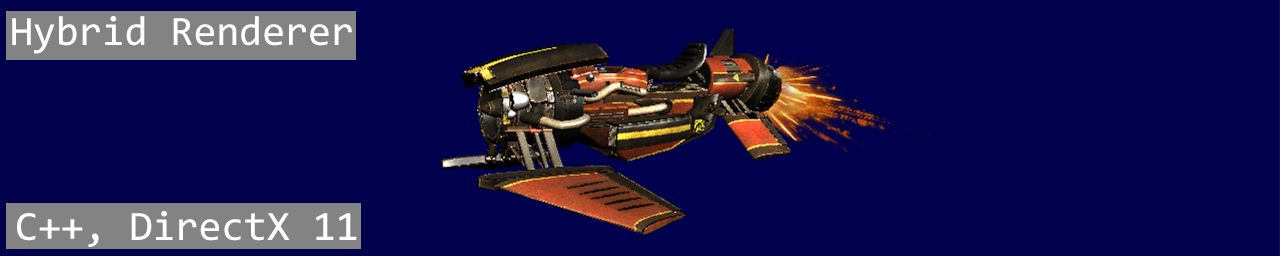
<style>
.page{position:relative;width:1280px;height:256px;background:#00004c}
.page>*{position:absolute;margin:0}
.t1{font:41.7px "Consolas";color:#ffffff}
</style>
<div class="page">
<p class="t1" style="left:12px;top:16px;width:340px;height:38px">Hybrid Renderer</p>
<p class="t1" style="left:17px;top:211px;width:340px;height:36px">C++, DirectX 11</p>
</div>
